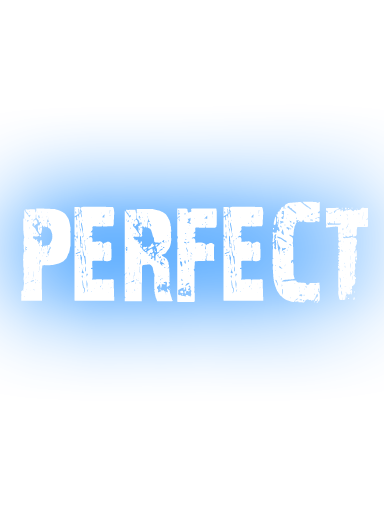
<style>
.page{position:relative;width:384px;height:512px;background:#ffffff}
.page>*{position:absolute;margin:0}
.t1{font:131.4px "28DaysLater";color:#ffffff;text-transform:uppercase;scale:0.81 1}
</style>
<div class="page">
<p class="t1" style="left:21px;top:201px;width:347px;height:102px">perfect</p>
</div>
